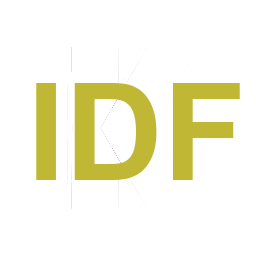
<style>
.page{position:relative;width:256px;height:256px;background:#ffffff}
.page>*{position:absolute;margin:0}
.t1{font:151.2px "SimplifiedArabic-Bold";color:#c0b835}
</style>
<div class="page">
<p class="t1" style="left:36px;top:83px;width:204px;height:97px">IDF</p>
</div>
